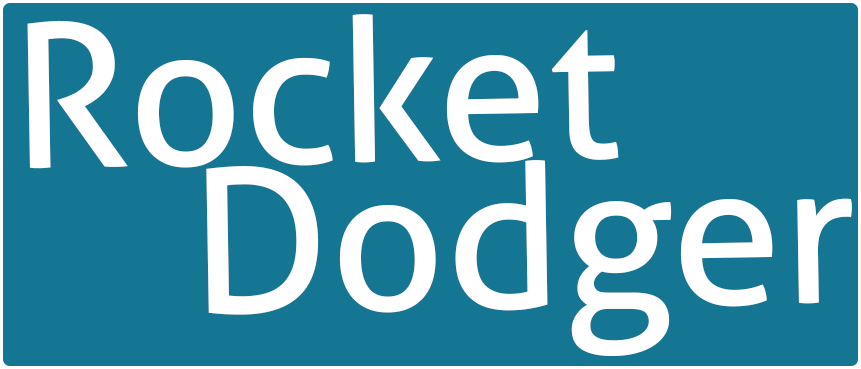
<style>
.page{position:relative;width:861px;height:369px;background:#147692}
.page>*{position:absolute;margin:0}
.t1{font:200px "Aller";color:#ffffff}
</style>
<div class="page">
<p class="t1" style="left:27px;top:14px;width:592px;height:155px;rotate:-1deg">Rocket</p>
<p class="t1" style="left:206px;top:160px;width:646px;height:196px;rotate:-1deg">Dodger</p>
</div>
